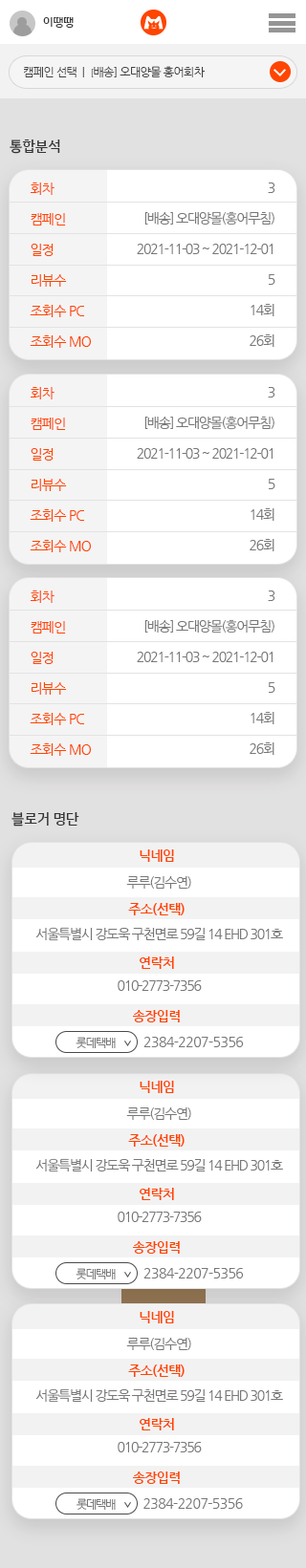
<style>
.page{position:relative;width:306px;height:1568px;background:#ffffff}
.page>*{position:absolute;margin:0}
.t1{font:11.5px "IBMPlexSansKR-Medium";color:#333333}
.t2{font:11.5px "NanumGothic";letter-spacing:-0.05em;color:#424242}
.t3{font:8.6px "NanumGothic";letter-spacing:-0.05em;color:#424242}
.t4{font:14.3px "IBMPlexSansKR-Medium";color:#333333}
.t5{font:13.4px/30.6px "NanumGothic";letter-spacing:-0.05em;color:#ff4500}
.t6{font:13.4px/30.6px "NanumGothic";letter-spacing:-0.09em;color:#777777}
.t7{font:13.4px/53.5px "NanumGothicBold";letter-spacing:-0.05em;color:#ff4500}
.t8{font:13.4px/51.6px "NanumGothic";letter-spacing:-0.09em;color:#777777}
.t9{font:11.5px/51.6px "NanumGothic";letter-spacing:-0.07em;color:#777777}
.t10{font:13.4px/56.4px "NanumGothic";letter-spacing:-0.04em;color:#777777}
.t11{font:11.5px/51.6px "NanumGothic";letter-spacing:-0.09em;color:#777777}
</style>
<div class="page">
<p class="t1" style="left:43px;top:17px;width:31px;height:11px">이땡땡</p>
<p class="t2" style="left:24px;top:66px;width:180px;height:11px">캠페인 선택  |  <span class="t3">[</span>배송] 오대양몰 홍어회차</p>
<p class="t4" style="left:10px;top:140px;width:50px;height:14px">통합분석</p>
<p class="t5" style="left:30px;top:183px;width:61px;height:165px">회차<br>캠페인<br>일정<br>리뷰수<br>조회수 PC<br>조회수 MO</p>
<p class="t6" style="left:137px;top:183px;width:138px;height:164px;text-align:right">3<br>[배송] 오대양몰(홍어무침)<br>2021-11-03 ~ 2021-12-01<br>5<br>14회<br>26회</p>
<p class="t5" style="left:30px;top:387px;width:61px;height:165px">회차<br>캠페인<br>일정<br>리뷰수<br>조회수 PC<br>조회수 MO</p>
<p class="t6" style="left:137px;top:387px;width:138px;height:164px;text-align:right">3<br>[배송] 오대양몰(홍어무침)<br>2021-11-03 ~ 2021-12-01<br>5<br>14회<br>26회</p>
<p class="t5" style="left:30px;top:591px;width:61px;height:165px">회차<br>캠페인<br>일정<br>리뷰수<br>조회수 PC<br>조회수 MO</p>
<p class="t6" style="left:137px;top:591px;width:138px;height:164px;text-align:right">3<br>[배송] 오대양몰(홍어무침)<br>2021-11-03 ~ 2021-12-01<br>5<br>14회<br>26회</p>
<p class="t4" style="left:11px;top:812px;width:68px;height:15px">블로거 명단</p>
<p class="t7" style="left:128px;top:849px;width:56px;height:173px;text-align:center">닉네임<br>주소(선택)<br>연락처<br>송장입력</p>
<p class="t8" style="left:36px;top:876px;width:247px;height:172px;text-align:center">루루(김수연)<br>서울특별시 강도욱 구천면로 59길 14 EHD 301호<br>010-2773-7356<br><span class="t9">롯데택배           </span><span class="t10">2384-2207-5356</span></p>
<p class="t7" style="left:128px;top:1081px;width:56px;height:173px;text-align:center">닉네임<br>주소(선택)<br>연락처<br>송장입력</p>
<p class="t8" style="left:36px;top:1107px;width:247px;height:172px;text-align:center">루루(김수연)<br>서울특별시 강도욱 구천면로 59길 14 EHD 301호<br>010-2773-7356<br><span class="t9">롯데택배           </span><span class="t10">2384-2207-5356</span></p>
<p class="t7" style="left:128px;top:1311px;width:56px;height:173px;text-align:center">닉네임<br>주소(선택)<br>연락처<br>송장입력</p>
<p class="t8" style="left:36px;top:1338px;width:247px;height:172px;text-align:center">루루(김수연)<br>서울특별시 강도욱 구천면로 59길 14 EHD 301호<br>010-2773-7356<br><span class="t11">롯데택배           </span><span class="t10">2384-2207-5356</span></p>
</div>
